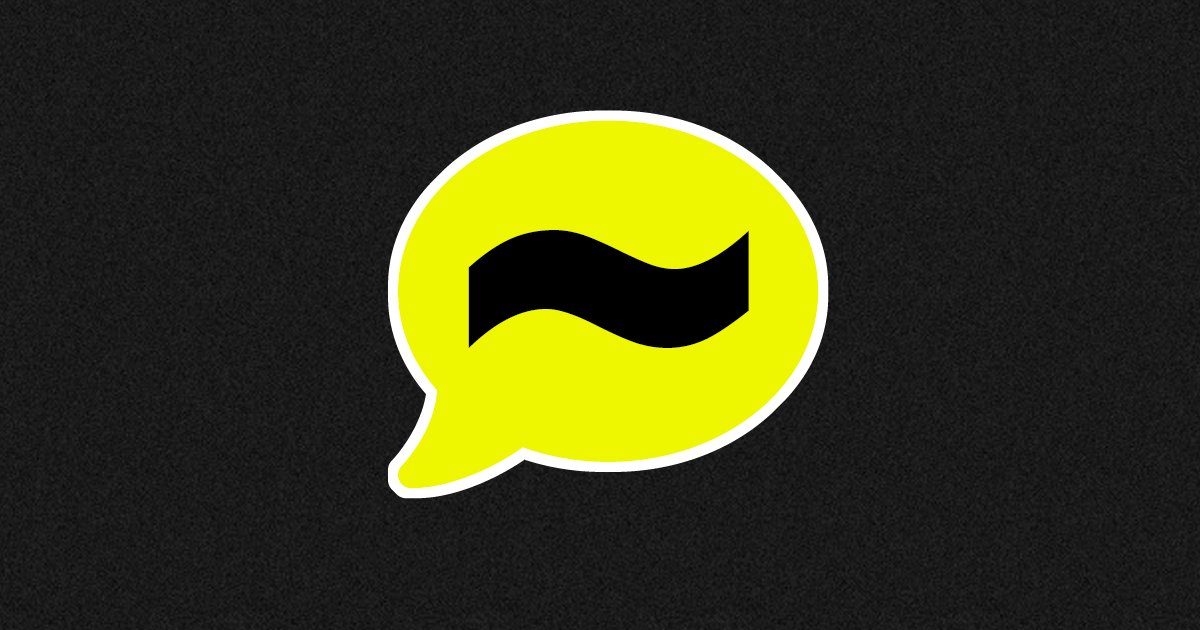
<style>
.page{position:relative;width:1200px;height:630px}
.page>*{position:absolute;margin:0}
.t1{font:500px "Arial-Black";color:#000000}
</style>
<div class="page">
<p class="t1" style="left:468px;top:230px;width:281px;height:118px">~</p>
</div>
